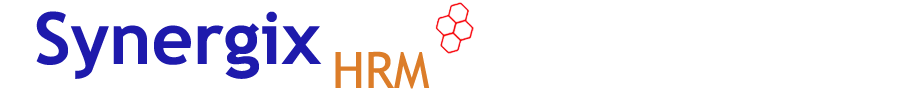
<style>
.page{position:relative;width:900px;height:96px;background:#ffffff}
.page>*{position:absolute;margin:0}
.t1{font:72px "TrebuchetMS-Bold";color:#1e1aac}
.t2{font:50px "TrebuchetMS";color:#dc7d29}
</style>
<div class="page">
<p class="t1" style="left:36px;top:11px;width:286px;height:68px">Synergix</p>
<p class="t2" style="left:335px;top:51px;width:95px;height:38px">HRM</p>
</div>
